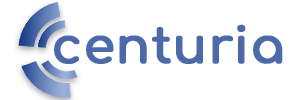
<style>
.page{position:relative;width:300px;height:100px;background:#ffffff}
.page>*{position:absolute;margin:0}
.t1{font:50px "Comfortaa-Bold";color:#4c6aa9;font-weight:bold}
</style>
<div class="page">
<p class="t1" style="left:54px;top:24px;width:229px;height:40px">centuria</p>
</div>
